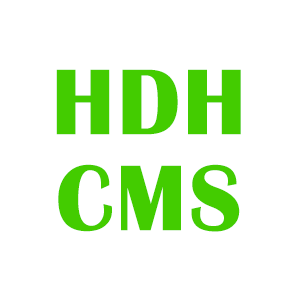
<style>
.page{position:relative;width:300px;height:300px;background:#ffffff}
.page>*{position:absolute;margin:0}
.t1{font:96px/96px "BritannicBold";color:#43cc00;font-weight:bold}
</style>
<div class="page">
<p class="t1" style="left:56px;top:69px;width:185px;height:163px;text-align:center">HDH<br>CMS</p>
</div>
